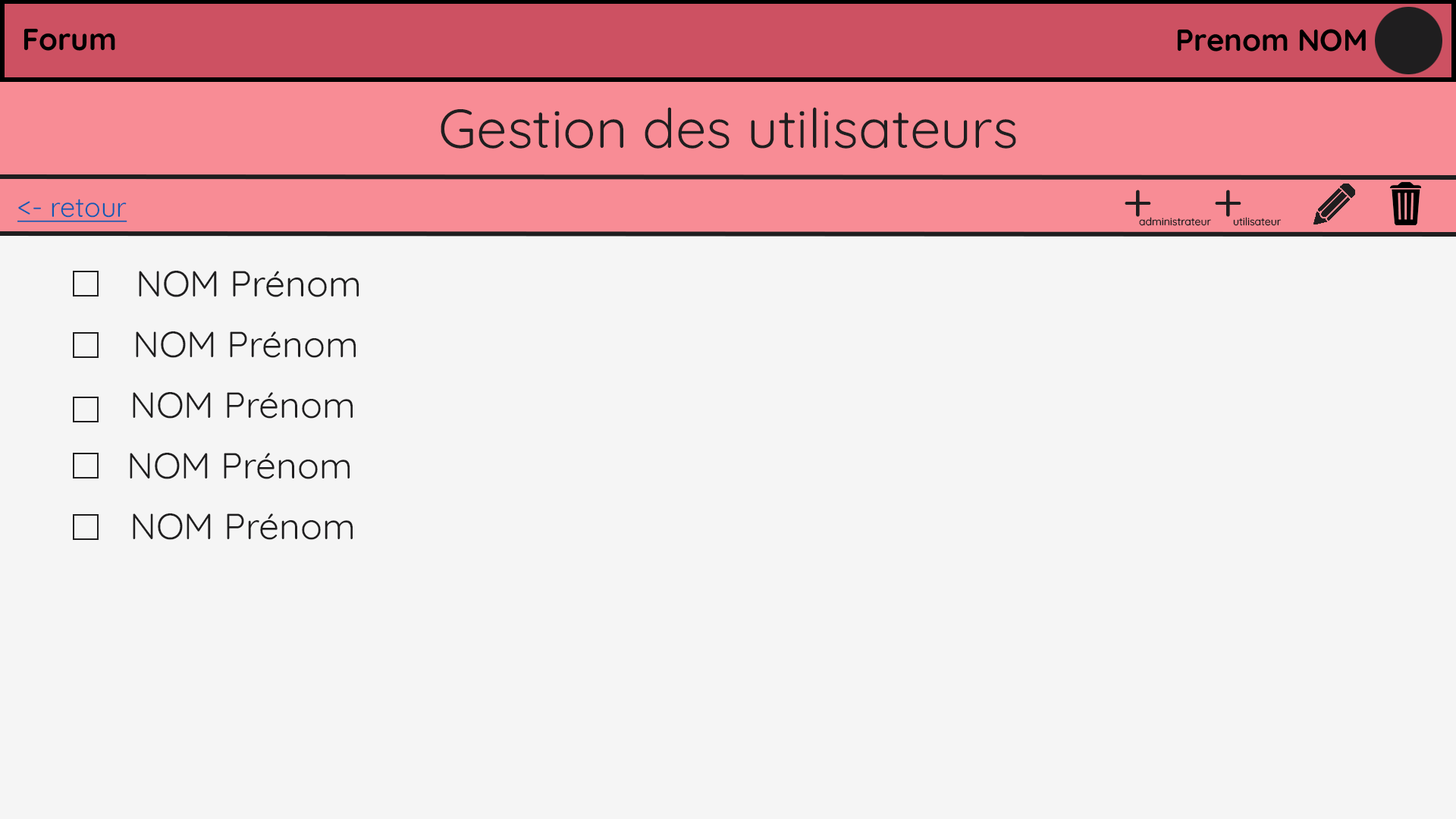
<style>
.page{position:relative;width:1456px;height:819px;background:#f5f5f5}
.page>*{position:absolute;margin:0}
.t1{font:54.6px "Quicksand-Regular";color:#1f1e1f}
.t2{font:27.3px "Quicksand-Regular";color:#145bb2;text-decoration:underline}
.t3{font:10.6px "Quicksand-Regular";color:#1f1e1f}
.t4{font:36.4px "Quicksand-Regular";color:#1f1e1f}
</style>
<div class="page">
<p class="t1" style="left:441px;top:107px;width:575px;height:42px">Gestion des utilisateurs</p>
<p class="t1" style="left:1125px;top:190px;width:116px;height:27px">+    +</p>
<p class="t2" style="left:17px;top:199px;width:110px;height:23px">&lt;- retour</p>
<p class="t3" style="left:1139px;top:217px;width:72px;height:9px">administrateur</p>
<p class="t3" style="left:1233px;top:217px;width:49px;height:9px">utilisateur</p>
<p class="t4" style="left:139px;top:270px;width:220px;height:27px">NOM Prénom</p>
<p class="t4" style="left:136px;top:331px;width:220px;height:27px">NOM Prénom</p>
<p class="t4" style="left:133px;top:392px;width:220px;height:27px">NOM Prénom</p>
<p class="t4" style="left:130px;top:453px;width:220px;height:26px">NOM Prénom</p>
<p class="t4" style="left:133px;top:513px;width:220px;height:27px">NOM Prénom</p>
</div>
